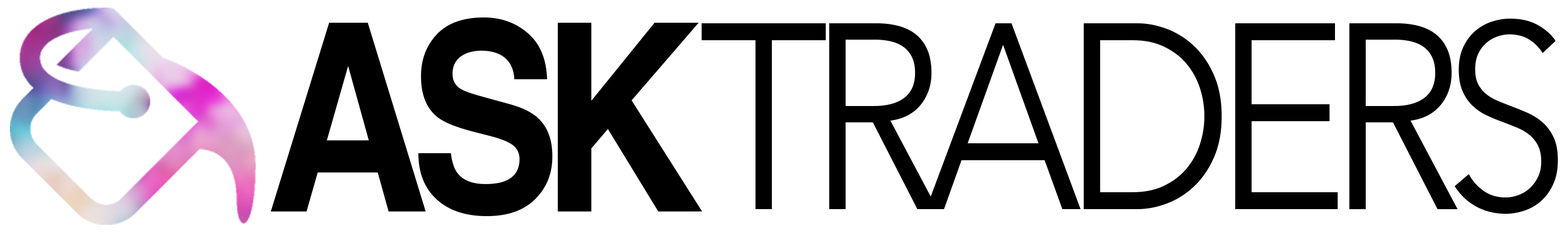
<style>
.page{position:relative;width:1568px;height:233px;background:#ffffff}
.page>*{position:absolute;margin:0}
.t1{font:262.1px "Helvetica-Bold";letter-spacing:-0.09em;color:#000000;scale:0.87 1}
.t2{font:262.1px "AvenirNext-Regular";letter-spacing:-0.09em;color:#000000;scale:0.87 1}
</style>
<div class="page">
<p class="t1" style="left:271px;top:17px;width:431px;height:199px">ASK</p>
<p class="t2" style="left:701px;top:19px;width:857px;height:195px">TRADERS</p>
</div>
